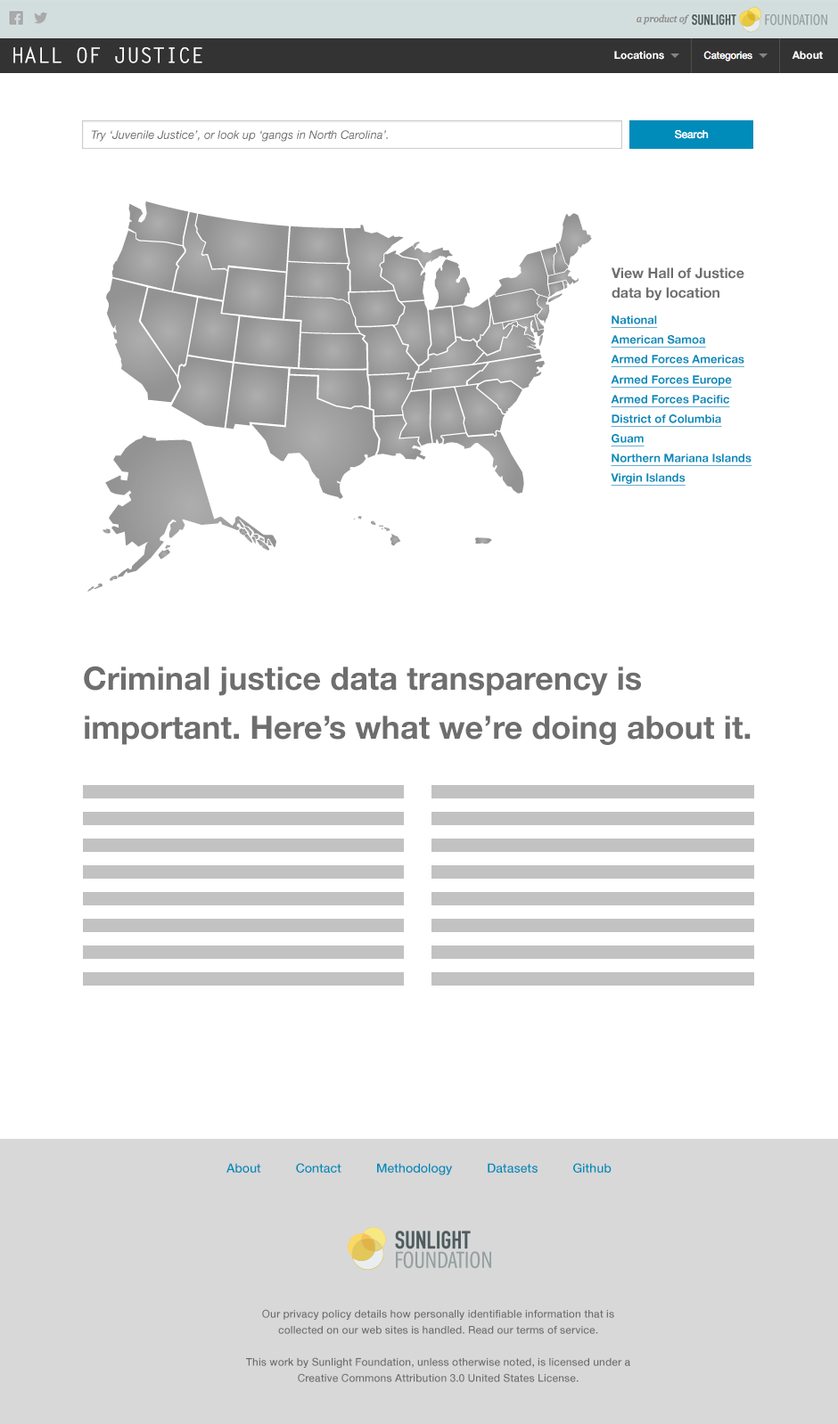
<style>
.page{position:relative;width:838px;height:1424px;background:#ffffff}
.page>*{position:absolute;margin:0}
.t1{font:21.4px "LetterGothicStd-Bold";color:#ffffff}
.t2{font:10.7px "HelveticaNeue-Bold";color:#ffffff}
.t3{font:11.6px "HelveticaNeue-Italic";color:#6e6e6e}
.t4{font:14.3px/19.6px "HelveticaNeue-Bold";color:#6e6e6e}
.t5{font:11.6px/19.6px "HelveticaNeue-Bold";color:#008cba;text-decoration:underline}
.t6{font:32.1px/49px "HelveticaNeue-Bold";color:#6e6e6e}
.t7{font:12.5px "HelveticaNeue-Medium";color:#008cba}
.t8{font:10.7px/16px "HelveticaNeue-Medium";color:#6e6e6e}
</style>
<div class="page">
<p class="t1" style="left:13px;top:46px;width:189px;height:17px">HALL OF JUSTICE</p>
<p class="t2" style="left:614px;top:51px;width:50px;height:9px">Locations</p>
<p class="t2" style="left:791px;top:51px;width:31px;height:9px">About</p>
<p class="t3" style="left:91px;top:130px;width:297px;height:12px">Try ‘Juvenile Justice’, or look up ‘gangs in North Carolina’.</p>
<p class="t4" style="left:611px;top:267px;width:133px;height:33px">View Hall of Justice <br>data by location</p>
<p class="t5" style="left:610px;top:315px;width:134px;height:52px">National<br>American Samoa<br>Armed Forces Americas</p>
<p class="t5" style="left:610px;top:375px;width:121px;height:52px">Armed Forces Europe<br>Armed Forces Pacific<br>District of Columbia</p>
<p class="t5" style="left:610px;top:434px;width:141px;height:52px">Guam<br>Northern Mariana Islands<br>Virgin Islands</p>
<p class="t6" style="left:84px;top:666px;width:666px;height:79px">Criminal justice data transparency is important. Here’s what we’re doing about it.</p>
<p class="t7" style="left:226px;top:1163px;width:385px;height:12px">About          Contact          Methodology          Datasets          Github</p>
<p class="t8" style="left:246px;top:1309px;width:384px;height:73px;text-align:center">Our privacy policy details how personally identifiable information that is collected on our web sites is handled. Read our terms of service.<br><br>This work by Sunlight Foundation, unless otherwise noted, is licensed under a Creative Commons Attribution 3.0 United States License.</p>
</div>
